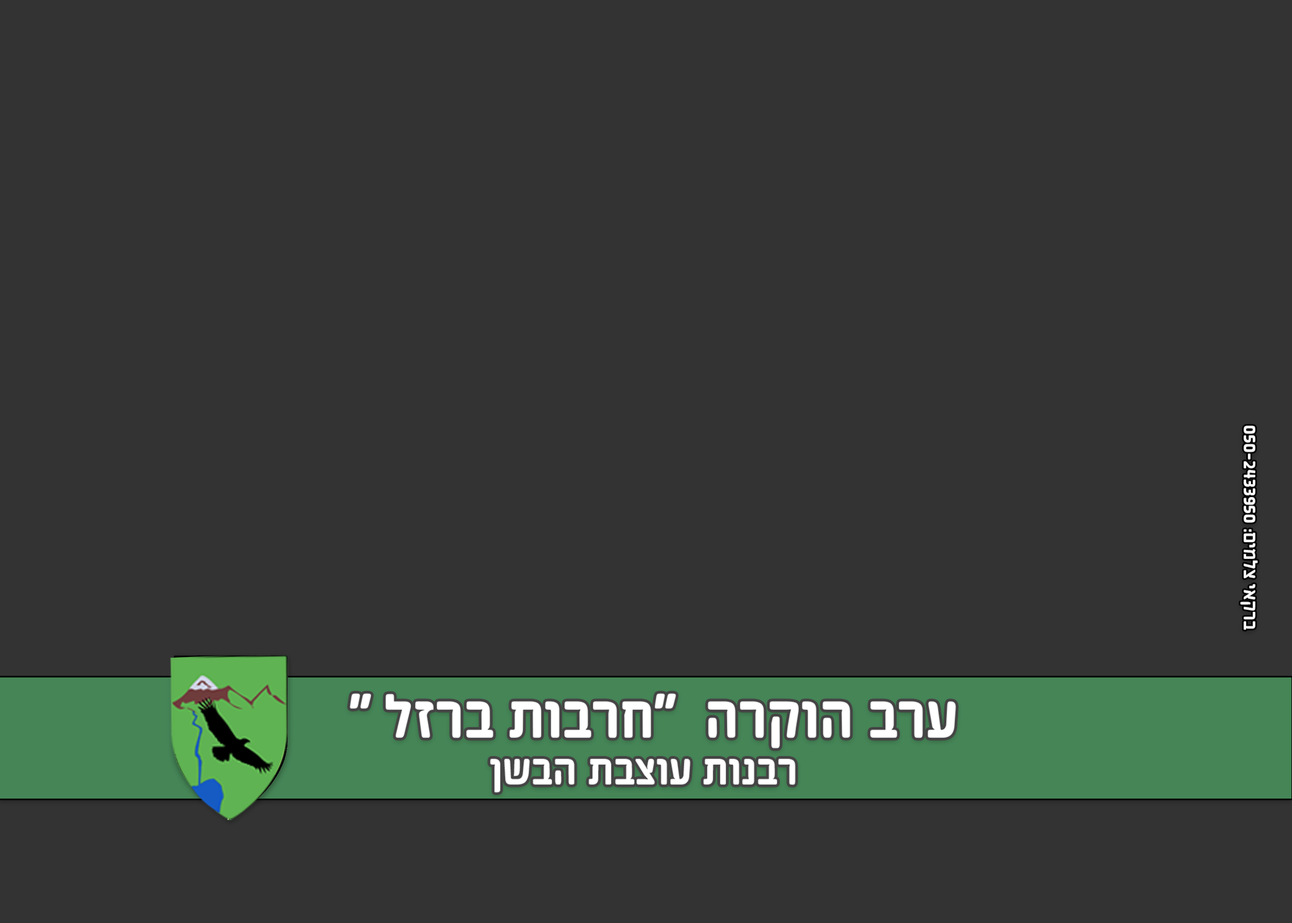
<style>
.page{position:relative;width:1292px;height:923px;background:#333333}
.page>*{position:absolute;margin:0}
.t1{font:20.2px "FtJimboryRounded1.01-Bold";color:#ffffff}
.t2{font:62.8px "FtJimboryRounded1.01-Bold";color:#ffffff}
.t3{font:44.9px "FtJimboryRounded1.01-Bold";color:#ffffff}
</style>
<div class="page">
<p class="t1" style="left:1240px;top:425px;width:18px;height:205px;rotate:90deg">ברקאי צלמים: 050-2433950</p>
<p class="t2" style="left:349px;top:693px;width:607px;height:56px">ערב הוקרה  "חרבות ברזל "</p>
<p class="t3" style="left:490px;top:759px;width:305px;height:34px">רבנות עוצבת הבשן</p>
</div>
